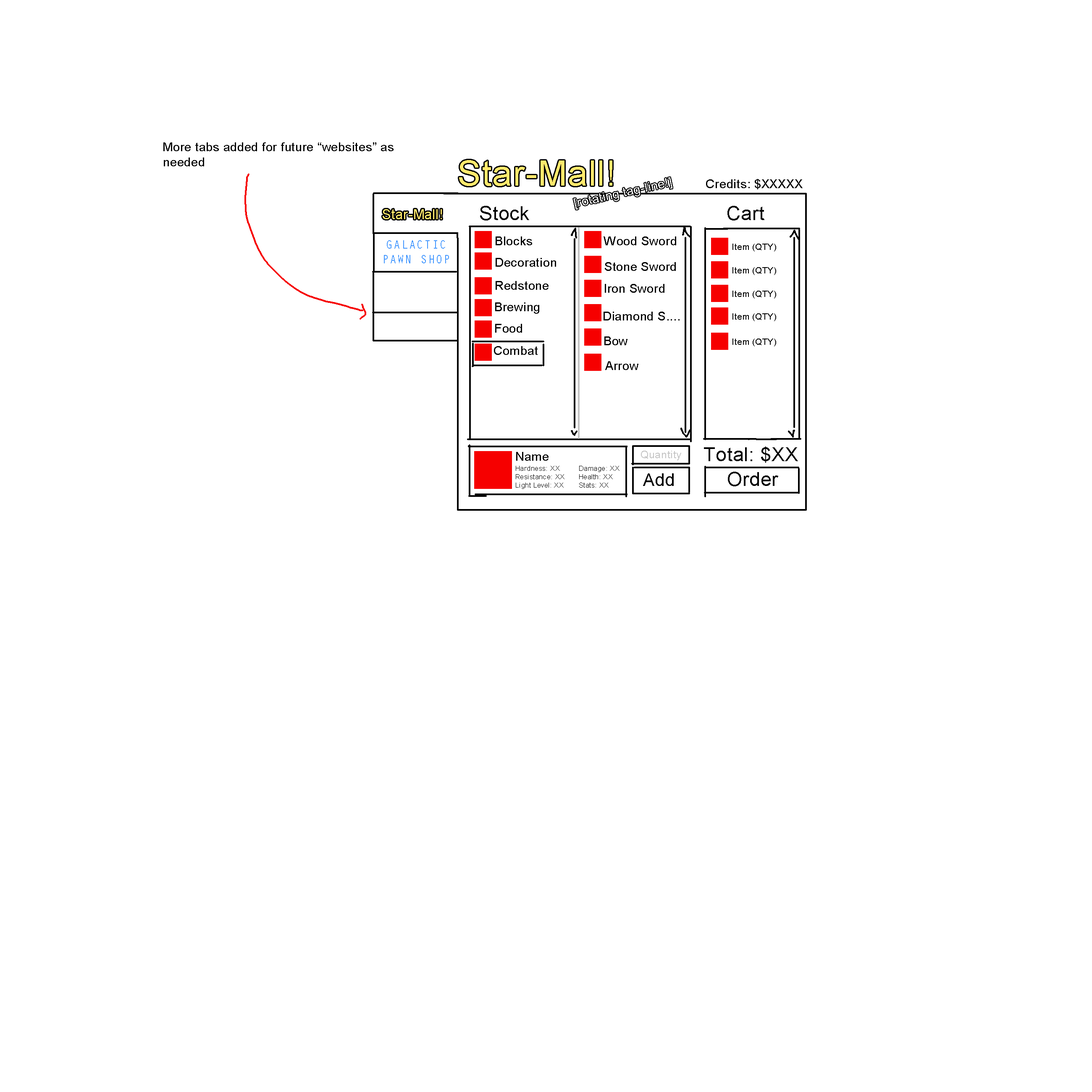
<style>
.page{position:relative;width:1092px;height:1092px;background:#ffffff}
.page>*{position:absolute;margin:0}
.t1{font:12.3px "ArialMT";letter-spacing:0.025em;color:#000000}
.t2{font:35px "ArialMT";letter-spacing:0.025em;color:#ffe96c}
.t3{font:14px "ArialMT";letter-spacing:0.025em;color:#ffe96c}
.t4{font:19.2px "ArialMT";letter-spacing:0.025em;color:#000000}
.t5{font:12.3px "OratorStd";letter-spacing:0.025em;color:#4196ff}
.t6{font:10.5px "ArialMT";letter-spacing:0.025em;color:#c3c3c3}
.t7{font:7px "ArialMT";letter-spacing:0.025em;color:#000000}
.t8{font:17.5px "ArialMT";letter-spacing:0.025em;color:#000000}
</style>
<div class="page">
<p class="t1" style="left:163px;top:142px;width:231px;height:24px">More tabs added for future “websites” as needed</p>
<p class="t2" style="left:459px;top:160px;width:153px;height:26px">Star-Mall!</p>
<p class="t1" style="left:706px;top:179px;width:97px;height:10px">Credits: $XXXXX</p>
<p class="t3" style="left:383px;top:209px;width:59px;height:10px">Star-Mall!</p>
<p class="t4" style="left:480px;top:206px;width:49px;height:14px">Stock</p>
<p class="t4" style="left:727px;top:206px;width:37px;height:14px">Cart</p>
<p class="t5" style="left:384px;top:240px;width:65px;height:23px;text-align:center">GALACTIC<br>PAWN SHOP</p>
<p class="t1" style="left:496px;top:236px;width:36px;height:9px">Blocks</p>
<p class="t1" style="left:604px;top:236px;width:72px;height:9px">Wood Sword</p>
<p class="t1" style="left:496px;top:258px;width:60px;height:9px">Decoration</p>
<p class="t1" style="left:605px;top:262px;width:71px;height:9px">Stone Sword</p>
<p class="t1" style="left:496px;top:281px;width:53px;height:9px">Redstone</p>
<p class="t1" style="left:605px;top:284px;width:59px;height:9px">Iron Sword</p>
<p class="t1" style="left:495px;top:302px;width:44px;height:12px">Brewing</p>
<p class="t1" style="left:604px;top:312px;width:76px;height:8px">Diamond S....</p>
<p class="t1" style="left:495px;top:324px;width:27px;height:9px">Food</p>
<p class="t1" style="left:604px;top:336px;width:23px;height:9px">Bow</p>
<p class="t1" style="left:494px;top:346px;width:44px;height:9px">Combat</p>
<p class="t1" style="left:605px;top:361px;width:33px;height:9px">Arrow</p>
<p class="t4" style="left:704px;top:446px;width:94px;height:17px">Total: $XX</p>
<p class="t1" style="left:516px;top:452px;width:33px;height:9px">Name</p>
<p class="t6" style="left:641px;top:451px;width:40px;height:9px">Quantity</p>
<p class="t7" style="left:516px;top:466px;width:48px;height:23px">Hardness: XX<br>Resistance: XX<br>Light Level: XX</p>
<p class="t7" style="left:579px;top:466px;width:40px;height:22px">Damage: XX<br>Health: XX<br>Stats: XX</p>
<p class="t8" style="left:643px;top:473px;width:31px;height:13px">Add</p>
<p class="t4" style="left:728px;top:472px;width:50px;height:14px">Order</p>
</div>
